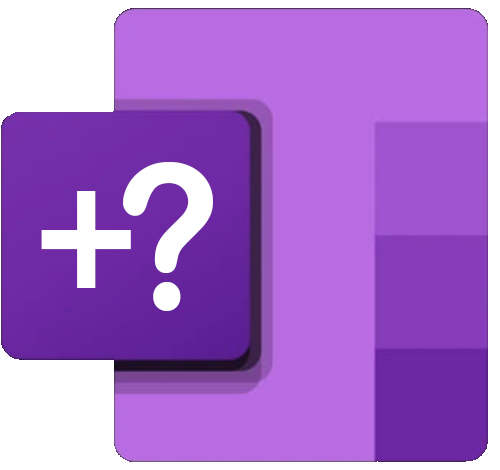
<style>
.page{position:relative;width:500px;height:470px;background:#b96ce2}
.page>*{position:absolute;margin:0}
.t1{font:201.6px "BookmanOldStyle-Bold";letter-spacing:-0.14em;color:#ffffff;scale:0.91 1}
.t2{font:201.6px "ArialRoundedMTBold";letter-spacing:-0.14em;color:#ffffff;scale:0.91 1}
</style>
<div class="page">
<p class="t1" style="left:41px;top:162px;width:172px;height:149px">+<span class="t2">?</span></p>
</div>
